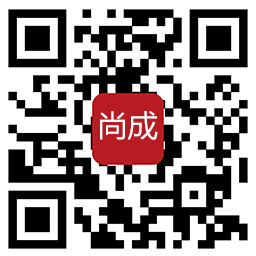
<style>
.page{position:relative;width:256px;height:256px;background:#ffffff}
.page>*{position:absolute;margin:0}
.t1{font:30px "MicrosoftYaHei";color:#fffefe}
</style>
<div class="page">
<p class="t1" style="left:100px;top:111px;width:58px;height:29px">尚成</p>
</div>
